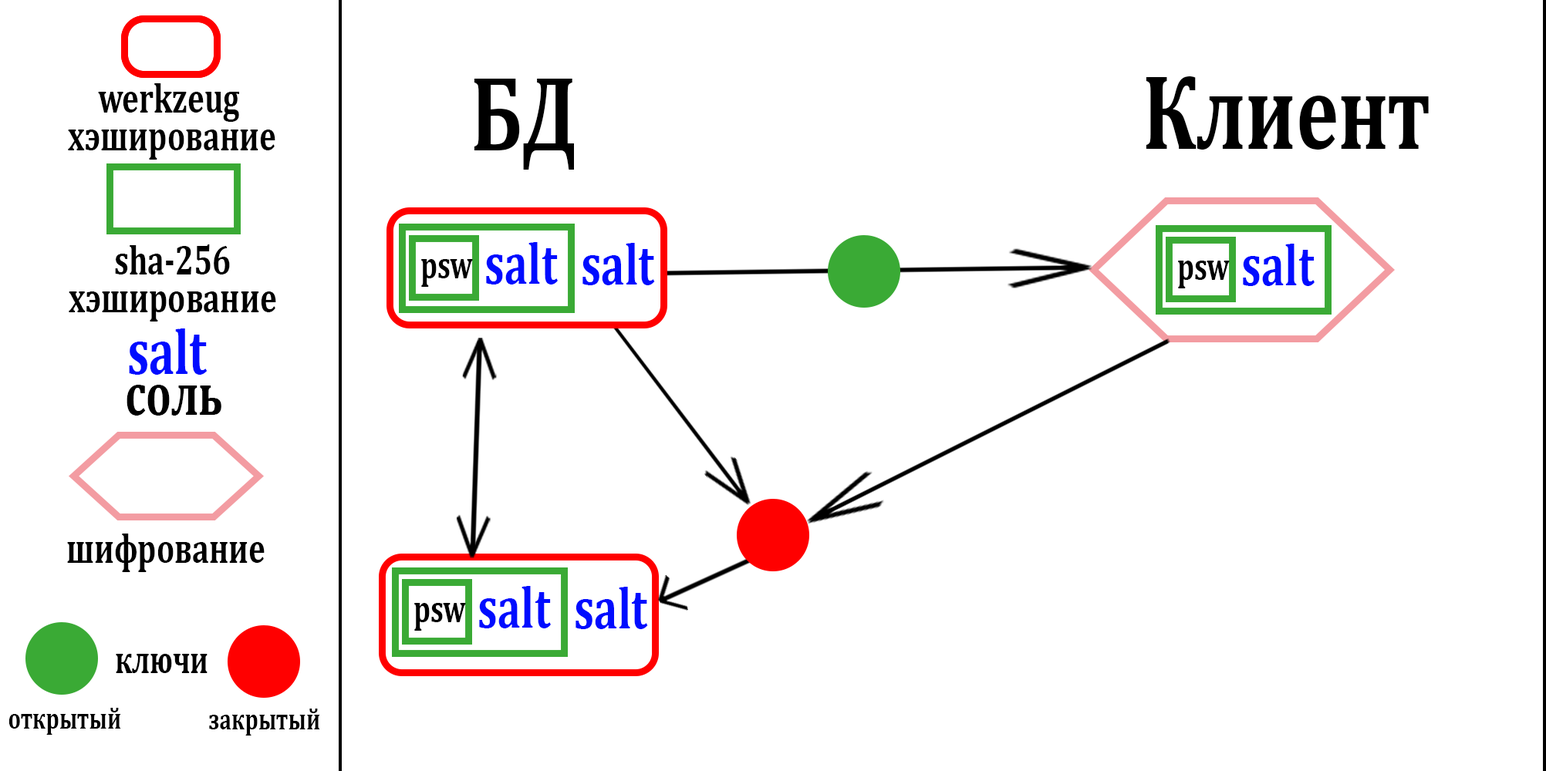
<style>
.page{position:relative;width:1546px;height:771px;background:#ffffff}
.page>*{position:absolute;margin:0}
.t1{font:107.8px "Cambria-Bold";color:#000000;scale:0.74 1}
.t2{font:42.7px "Cambria-Bold";color:#000000;scale:0.74 1}
.t3{font:58.5px "Cambria-Bold";color:#000cff;scale:0.74 1}
.t4{font:59.3px "Cambria-Bold";color:#000cff;scale:0.74 1}
.t5{font:38.4px "Cambria-Bold";color:#000000;scale:0.74 1}
.t6{font:64.4px "Cambria-Bold";color:#000cff;scale:0.74 1}
.t7{font:60.1px "Cambria-Bold";color:#000000;scale:0.74 1}
.t8{font:39.1px "Cambria-Bold";color:#000000;scale:0.74 1}
.t9{font:30.4px "Cambria-Bold";color:#000000;scale:0.74 1}
</style>
<div class="page">
<p class="t1" style="left:1145px;top:76px;width:284px;height:74px">Клиент</p>
<p class="t2" style="left:68px;top:83px;width:207px;height:77px;text-align:center">werkzeug<br> хэширование</p>
<p class="t1" style="left:474px;top:79px;width:100px;height:91px">БД</p>
<p class="t2" style="left:69px;top:245px;width:207px;height:77px;text-align:center">sha-256<br>хэширование</p>
<p class="t3" style="left:486px;top:242px;width:72px;height:43px">salt</p>
<p class="t4" style="left:582px;top:243px;width:73px;height:42px">salt</p>
<p class="t3" style="left:1243px;top:244px;width:71px;height:42px">salt</p>
<p class="t5" style="left:421px;top:259px;width:52px;height:28px">psw</p>
<p class="t5" style="left:1178px;top:261px;width:52px;height:27px">psw</p>
<p class="t6" style="left:129px;top:329px;width:79px;height:46px">salt</p>
<p class="t7" style="left:127px;top:385px;width:94px;height:31px">соль</p>
<p class="t2" style="left:67px;top:534px;width:198px;height:38px">шифрование</p>
<p class="t3" style="left:479px;top:586px;width:72px;height:43px">salt</p>
<p class="t4" style="left:575px;top:587px;width:73px;height:42px">salt</p>
<p class="t5" style="left:414px;top:603px;width:52px;height:28px">psw</p>
<p class="t8" style="left:116px;top:654px;width:92px;height:19px">ключи</p>
<p class="t9" style="left:8px;top:708px;width:113px;height:27px">открытый</p>
<p class="t9" style="left:209px;top:709px;width:111px;height:27px">закрытый</p>
</div>
